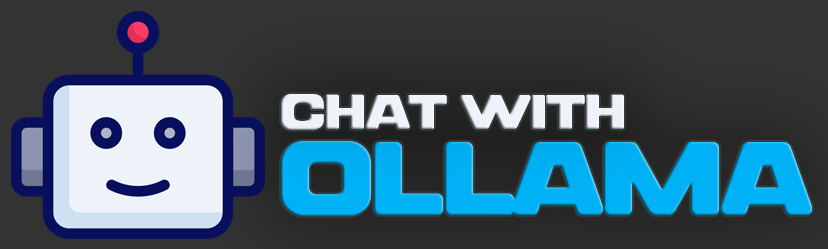
<style>
.page{position:relative;width:828px;height:249px;background:#333333}
.page>*{position:absolute;margin:0}
.t1{font:47.4px "ValonikPersonalUse-SemiBold";letter-spacing:-0.05em;color:#eff3f9;text-transform:uppercase;font-weight:bold;scale:1.03 1}
.t2{font:98.5px "ValonikPersonalUse-SemiBold";letter-spacing:-0.05em;color:#00b1f5;text-transform:uppercase;font-weight:bold;scale:1.03 1}
</style>
<div class="page">
<p class="t1" style="left:281px;top:94px;width:343px;height:36px">Chat With</p>
<p class="t2" style="left:280px;top:140px;width:533px;height:76px">OLLAMA</p>
</div>
